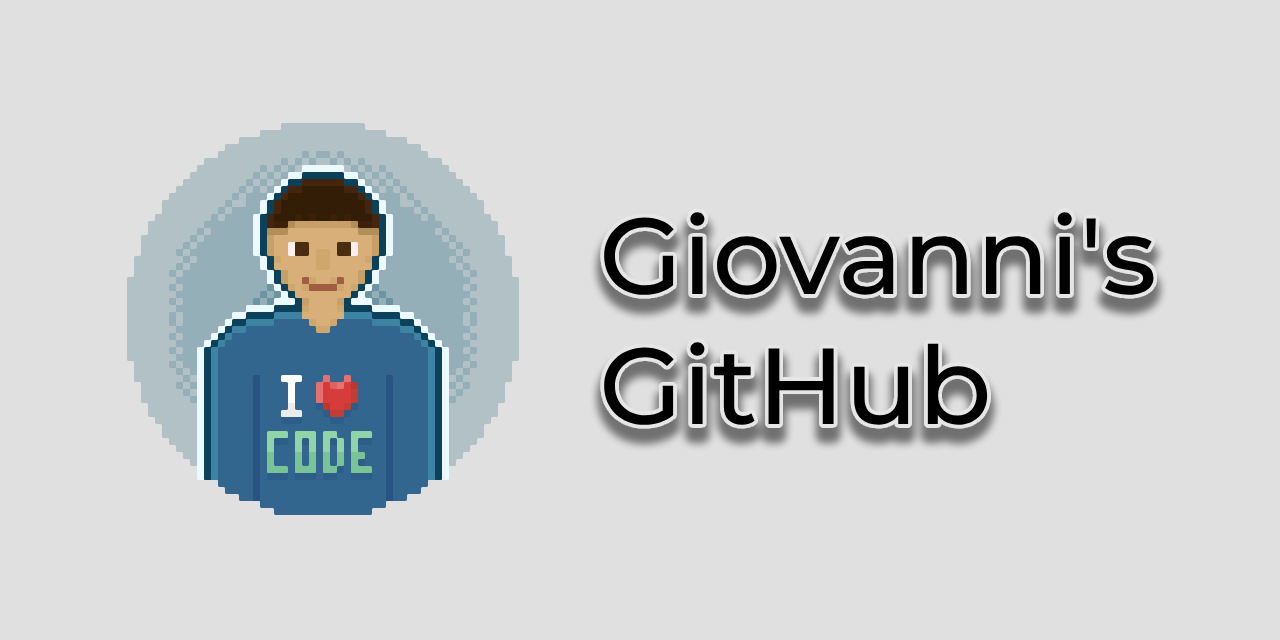
<style>
.page{position:relative;width:1280px;height:640px;background:#e0e0e0}
.page>*{position:absolute;margin:0}
.t1{font:108px "Montserrat-Medium";color:#000000}
</style>
<div class="page">
<p class="t1" style="left:604px;top:212px;width:550px;height:213px">Giovanni's<br>GitHub</p>
</div>
